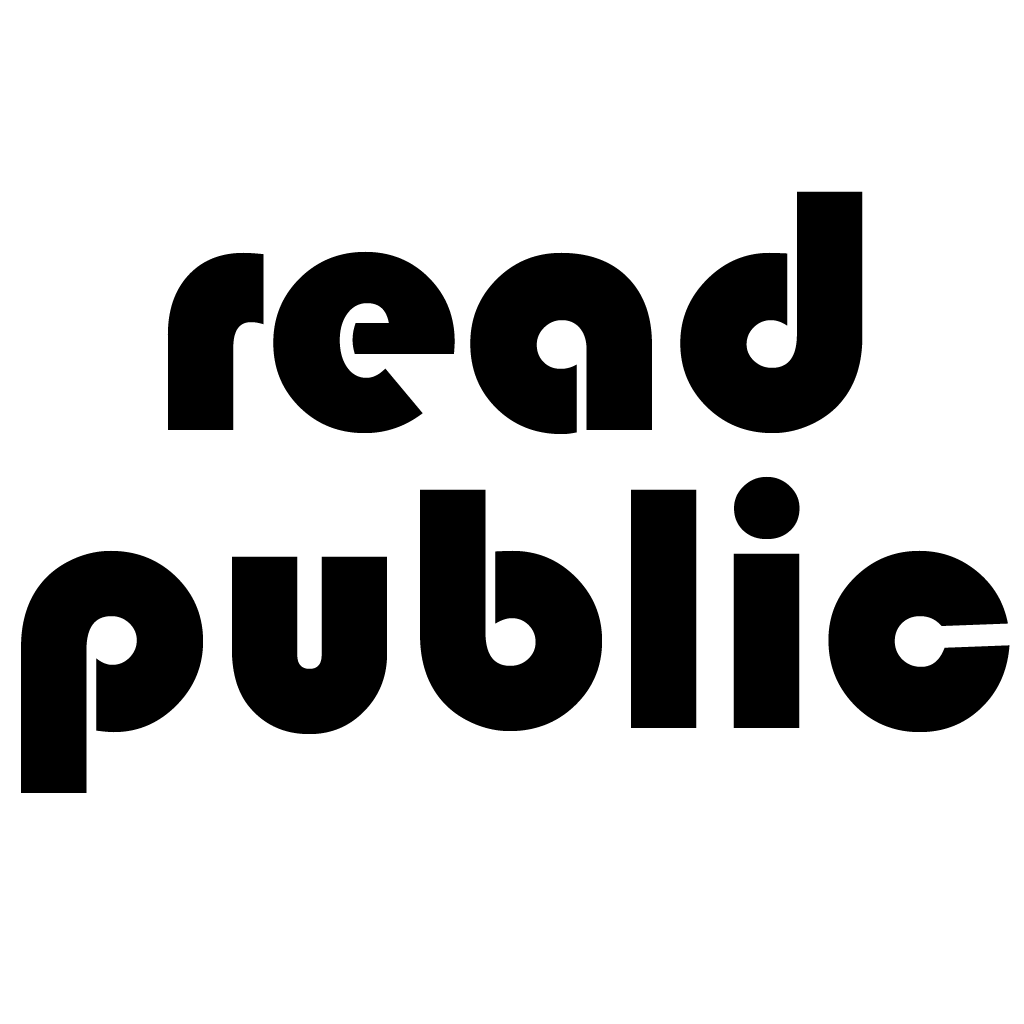
<style>
.page{position:relative;width:1024px;height:1024px;background:#ffffff}
.page>*{position:absolute;margin:0}
.t1{font:356.9px "Bauhaus93";color:#000000}
</style>
<div class="page">
<p class="t1" style="left:167px;top:191px;width:696px;height:243px">read</p>
<p class="t1" style="left:21px;top:476px;width:989px;height:317px">public</p>
</div>
